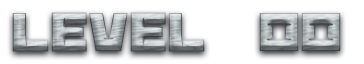
<style>
.page{position:relative;width:364px;height:64px;background:#ffffff}
.page>*{position:absolute;margin:0}
.t1{font:60px "BananaBrick"}
</style>
<div class="page">
<p class="t1" style="left:12px;top:12px;width:329px;height:40px">Level  00</p>
</div>
